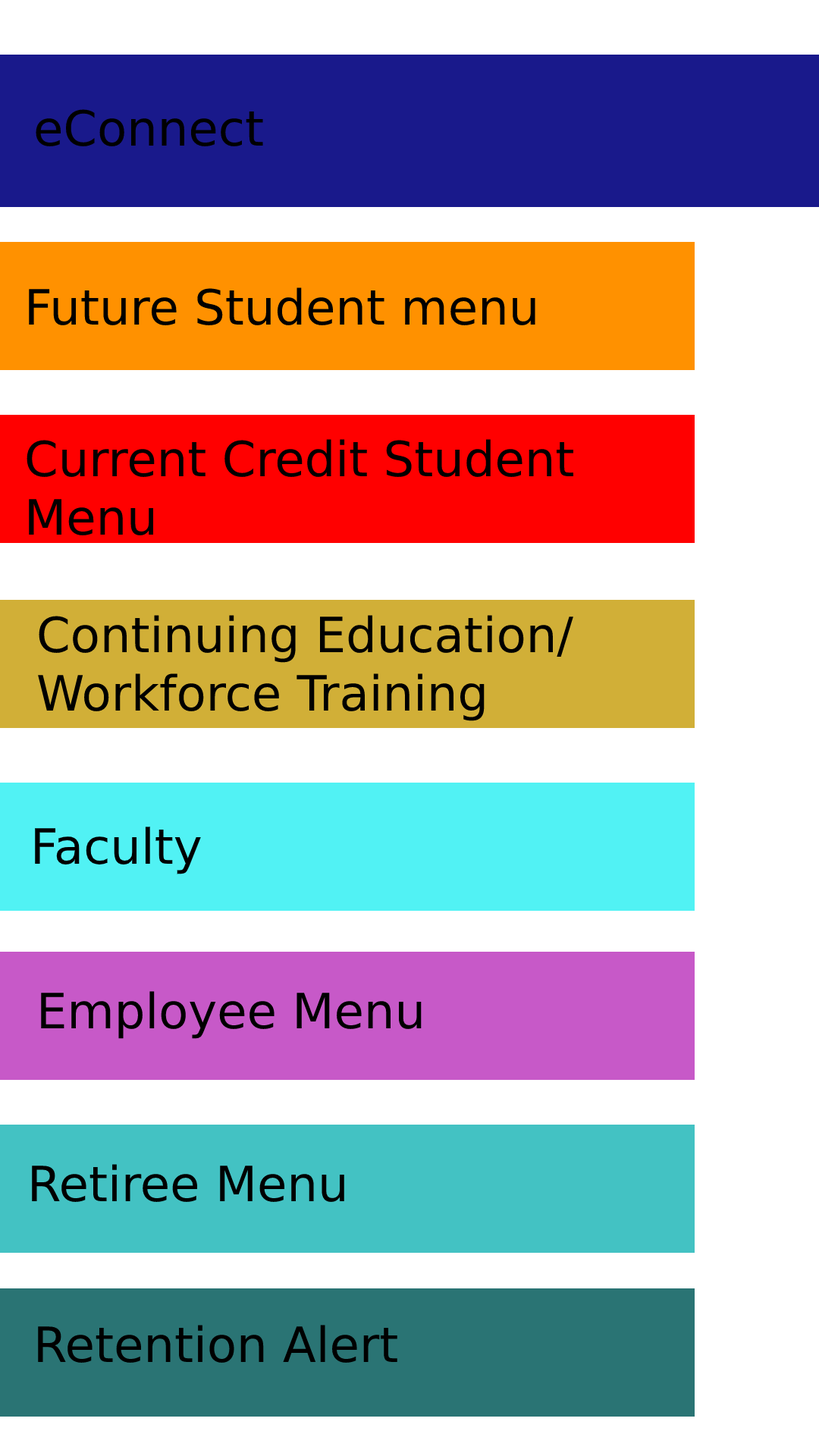
<style>
.page{position:relative;width:819px;height:1456px;background:#ffffff}
.page>*{position:absolute;margin:0}
.t1{font:48.5px "DejaVuSans";color:#000000}
</style>
<div class="page">
<p class="t1" style="left:36px;top:109px;width:227px;height:37px">eConnect</p>
<p class="t1" style="left:29px;top:287px;width:506px;height:38px">Future Student menu</p>
<p class="t1" style="left:27px;top:439px;width:546px;height:96px">Current Credit Student <br>Menu</p>
<p class="t1" style="left:38px;top:615px;width:535px;height:106px">Continuing Education/ <br>Workforce Training</p>
<p class="t1" style="left:35px;top:827px;width:166px;height:47px">Faculty</p>
<p class="t1" style="left:41px;top:991px;width:381px;height:48px">Employee Menu</p>
<p class="t1" style="left:32px;top:1164px;width:312px;height:38px">Retiree Menu</p>
<p class="t1" style="left:38px;top:1325px;width:359px;height:38px">Retention Alert</p>
</div>
